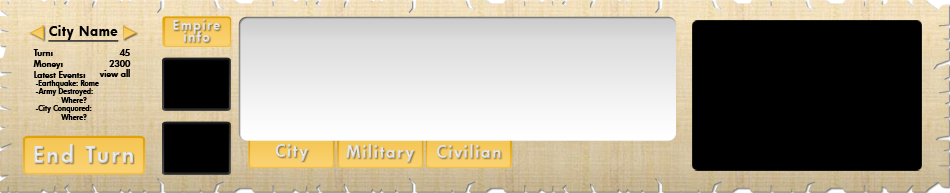
<style>
.page{position:relative;width:950px;height:193px;background:#000000}
.page>*{position:absolute;margin:0}
.t1{font:13.7px "FuturaHv";letter-spacing:0.05em;color:#000000}
.t2{font:13.7px/12.2px "FuturaHv";letter-spacing:0.1em;color:#f1f1f1}
.t3{font:7.6px/8.4px "FuturaHv";color:#000000}
.t4{font:9.2px "FuturaHv";color:#000000}
.t5{font:22.9px "FuturaHv";letter-spacing:0.1em;color:#f1f1f1}
.t6{font:16.8px "FuturaHv";letter-spacing:0.1em;color:#f1f1f1}
</style>
<div class="page">
<p class="t1" style="left:49px;top:25px;width:69px;height:15px">City Name</p>
<p class="t2" style="left:173px;top:19px;width:48px;height:23px;text-align:center">Empire<br>info</p>
<p class="t3" style="left:33px;top:49px;width:66px;height:71px"><span class="t4">Turn:<br>Money:<br>Latest Events:<br></span> -Earthquake: Rome<br> -Army Destroyed: <br> Where?<br> -City Conquored:<br> Where?</p>
<p class="t4" style="left:109px;top:49px;width:22px;height:18px;text-align:right">45<br>2300</p>
<p class="t4" style="left:99px;top:69px;width:31px;height:8px">view all</p>
<p class="t5" style="left:34px;top:144px;width:99px;height:19px">End Turn</p>
<p class="t6" style="left:275px;top:144px;width:33px;height:17px">City</p>
<p class="t6" style="left:346px;top:144px;width:68px;height:18px">Military</p>
<p class="t6" style="left:437px;top:144px;width:64px;height:14px">Civilian</p>
</div>
